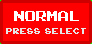
<style>
.page{position:relative;width:92px;height:44px;background:#ff0000}
.page>*{position:absolute;margin:0}
.t1{font:20px "ArcadeClassic";color:#ffffff}
.t2{font:12.4px "ArcadeClassic";color:#e6e6e6;scale:0.97 1}
</style>
<div class="page">
<p class="t1" style="left:14px;top:11px;width:65px;height:10px">NORMAL</p>
<p class="t2" style="left:6px;top:28px;width:80px;height:6px">press  select</p>
</div>
